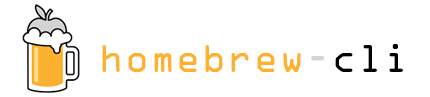
<style>
.page{position:relative;width:430px;height:97px;background:#ffffff}
.page>*{position:absolute;margin:0}
.t1{font:36px "OCRAStd";color:#fcb12f}
.t2{font:36px "OCRAStd";color:#d1d3d4}
.t3{font:36px "OCRAStd";color:#000000}
</style>
<div class="page">
<p class="t1" style="left:102px;top:44px;width:301px;height:28px">homebrew<span class="t2">-</span><span class="t3">cli</span></p>
</div>
